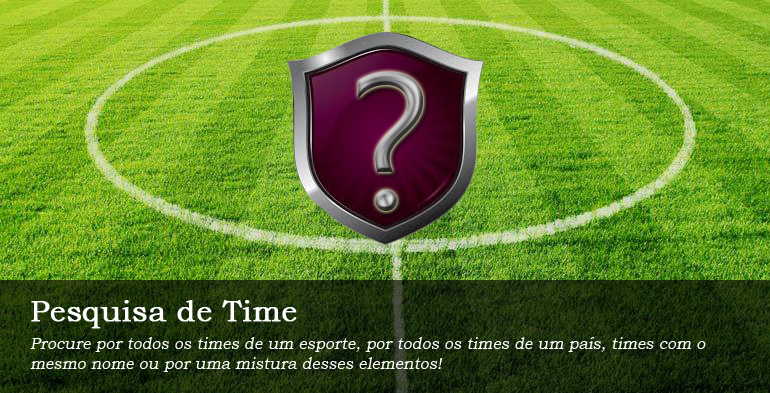
<style>
.page{position:relative;width:770px;height:393px}
.page>*{position:absolute;margin:0}
.t1{font:192.7px "NirmalaUI"}
.t2{font:30px "BookmanOldStyle";color:#fefefe;font-weight:bold}
.t3{font:16px "BookmanOldStyle";color:#fefefe;font-style:italic}
</style>
<div class="page">
<p class="t1" style="left:358px;top:71px;width:65px;height:140px">?</p>
<p class="t2" style="left:31px;top:300px;width:266px;height:29px">Pesquisa de Time</p>
<p class="t3" style="left:30px;top:337px;width:676px;height:35px">Procure por todos os times de um esporte, por todos os times de um país, times com o mesmo nome ou por uma mistura desses elementos!</p>
</div>
